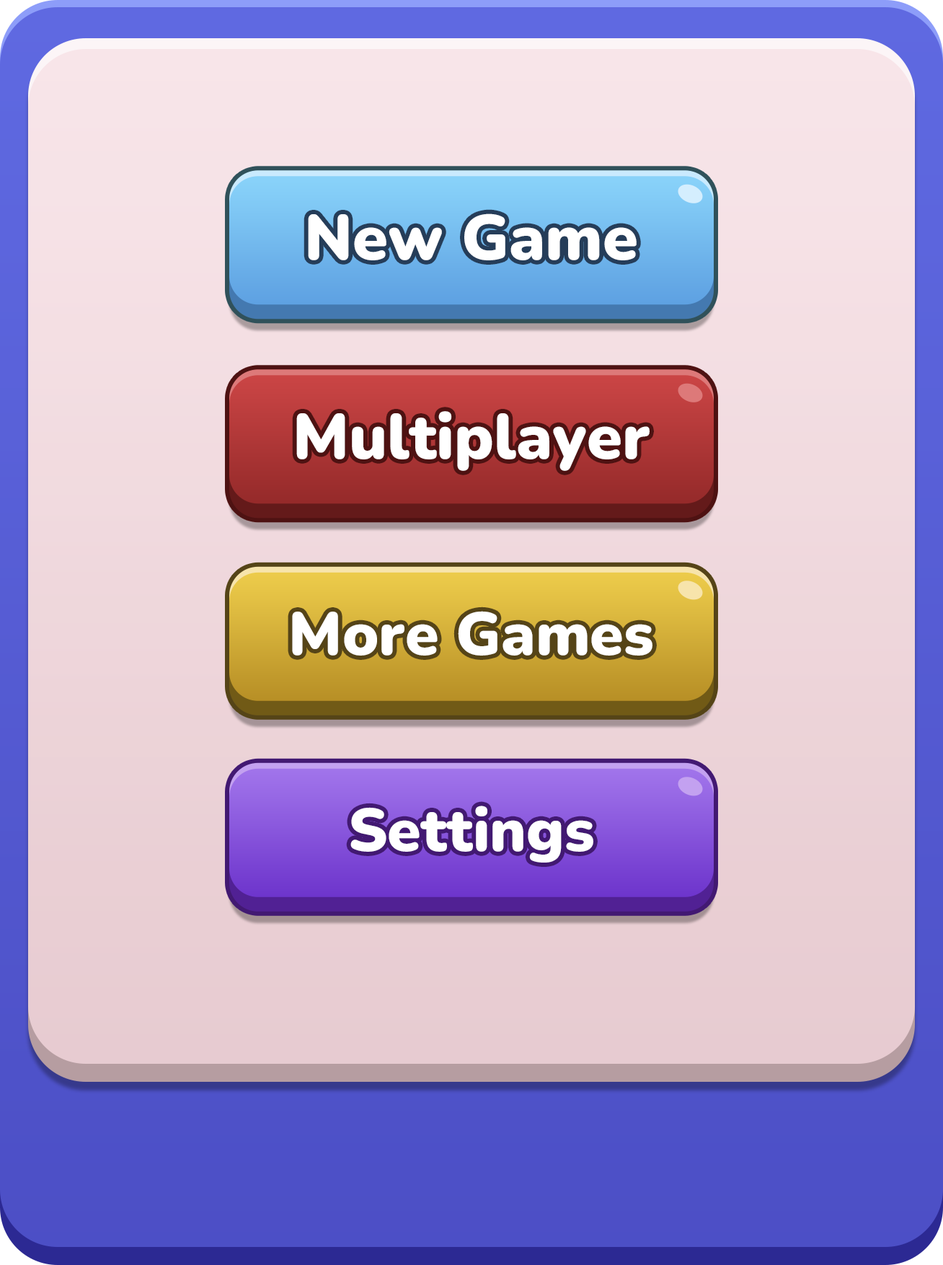
<style>
.page{position:relative;width:943px;height:1265px}
.page>*{position:absolute;margin:0}
.t1{font:63.7px "Nunito-Black";color:#ffffff}
.t2{font:60.5px "Nunito-Black";color:#ffffff}
</style>
<div class="page">
<p class="t1" style="left:308px;top:213px;width:329px;height:47px">New Game</p>
<p class="t1" style="left:296px;top:411px;width:354px;height:60px">Multiplayer</p>
<p class="t2" style="left:292px;top:611px;width:360px;height:44px">More Games</p>
<p class="t2" style="left:350px;top:805px;width:243px;height:57px">Settings</p>
</div>
